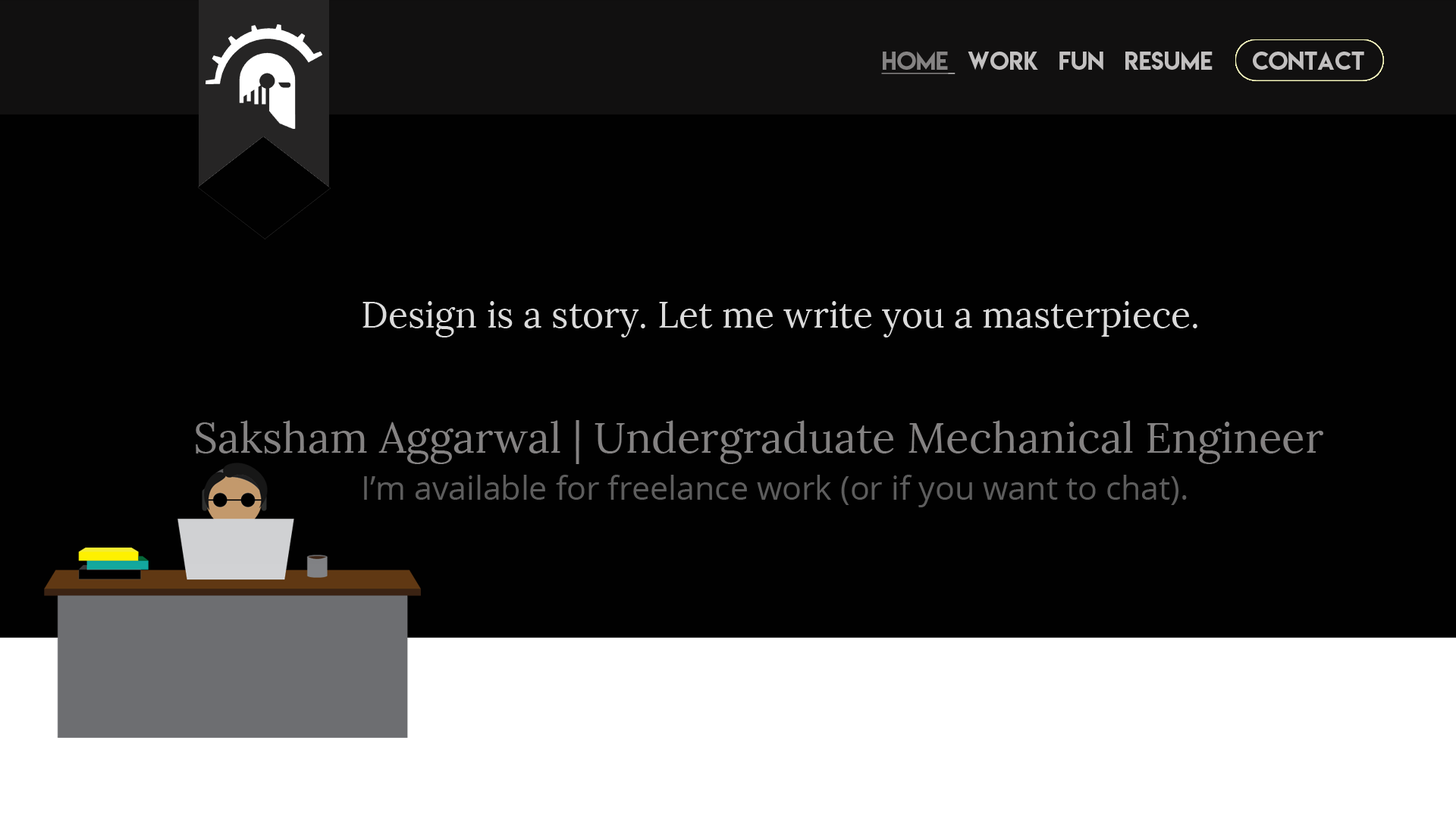
<style>
.page{position:relative;width:1456px;height:819px;background:#010101}
.page>*{position:absolute;margin:0}
.t1{font:22.7px "LemonMilk";color:#c3c1c1}
.t2{font:22.7px "LemonMilk";color:#868484;text-decoration:underline}
.t3{font:36.4px "Lora-Regular";color:#dcdcdc}
.t4{font:42.7px "Lora-Regular";color:#858383}
.t5{font:32.4px "OpenSans-Regular";color:#5d5d5d}
</style>
<div class="page">
<p class="t1" style="left:881px;top:51px;width:483px;height:23px"><span class="t2">HOME </span>  WORK   FUN   RESUME      CONTACT</p>
<p class="t3" style="left:362px;top:301px;width:835px;height:36px">Design is a story. Let me write you a masterpiece.</p>
<p class="t4" style="left:196px;top:420px;width:1127px;height:44px">Saksham Aggarwal | Undergraduate Mechanical Engineer</p>
<p class="t5" style="left:364px;top:475px;width:823px;height:32px">I’m available for freelance work (or if you want to chat).</p>
</div>
